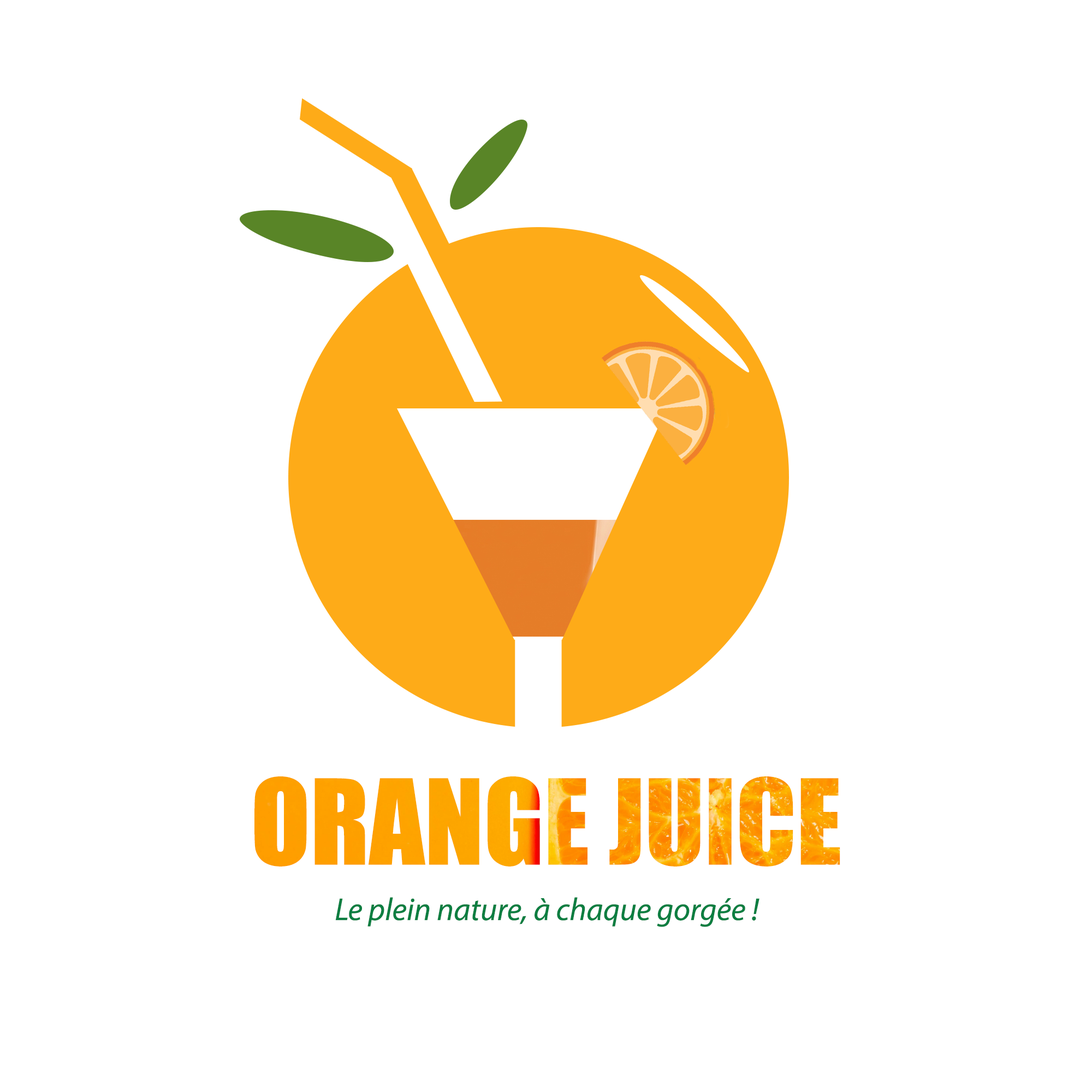
<style>
.page{position:relative;width:1092px;height:1092px;background:#ffffff}
.page>*{position:absolute;margin:0}
.t1{font:109.2px "Impact";color:#fda100}
.t2{font:31.8px "MyriadPro-It";color:#0b7e41}
</style>
<div class="page">
<p class="t1" style="left:254px;top:776px;width:586px;height:90px">ORANGE JUICE</p>
<p class="t2" style="left:335px;top:897px;width:424px;height:30px">Le plein nature, à chaque gorgée !</p>
</div>
